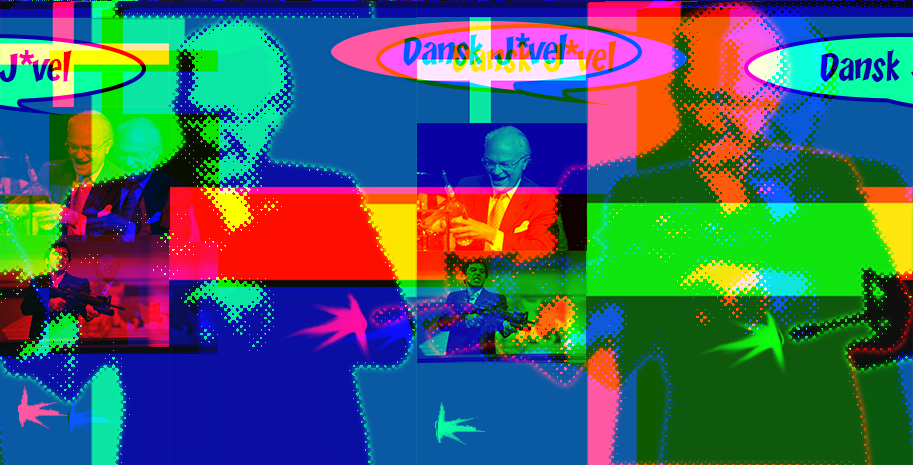
<style>
.page{position:relative;width:913px;height:465px}
.page>*{position:absolute;margin:0}
.t1{font:36px "Yikes"}
</style>
<div class="page">
<p class="t1" style="left:403px;top:32px;width:165px;height:33px">Dansk J*vel</p>
</div>
